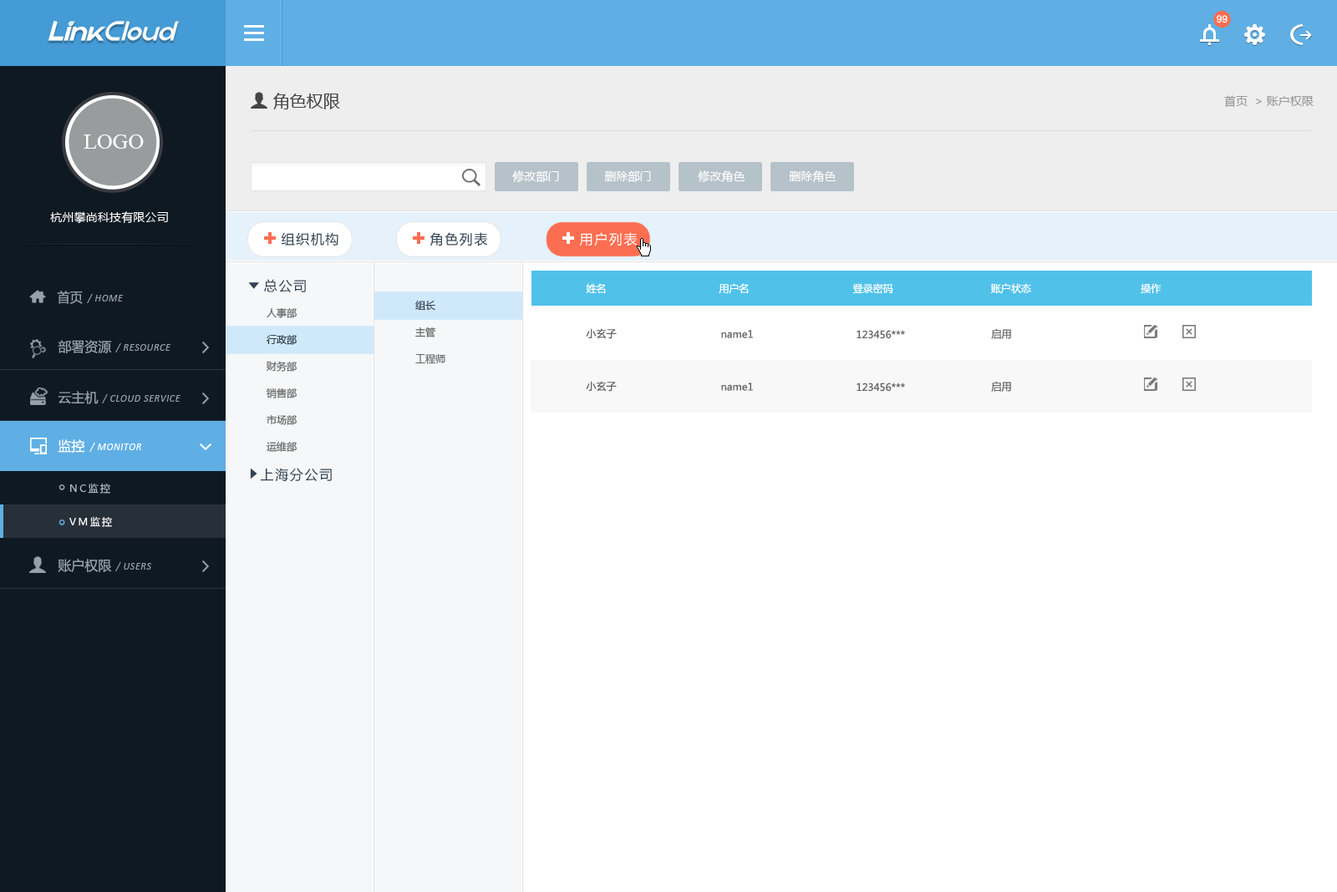
<style>
.page{position:relative;width:1337px;height:892px;background:#ffffff}
.page>*{position:absolute;margin:0}
.t1{font:10px "ArialMT";color:#ffffff}
.t2{font:16.7px "MicrosoftYaHei";color:#444444}
.t3{font:11.7px "MicrosoftYaHei";color:#999999}
.t4{font:21.7px "TimesNewRomanPSMT";color:#ffffff}
.t5{font:11.7px "MicrosoftYaHei";color:#ffffff}
.t6{font:11.7px "MicrosoftYaHei";letter-spacing:0.01em;color:#ffffff}
.t7{font:13.4px "MicrosoftYaHei";letter-spacing:0.1em;color:#334353}
.t8{font:13.4px "MicrosoftYaHei";letter-spacing:0.1em;color:#ffffff}
.t9{font:13.4px "MicrosoftYaHei";color:#95a0aa;scale:0.96 1}
.t10{font:10px "MicrosoftYaHei";color:#ffffff}
.t11{font:10px "Calibri-Italic";letter-spacing:0.05em;color:#95a0aa}
.t12{font:10px/26.7px "MicrosoftYaHei";color:#666666}
.t13{font:10px/26.7px "MicrosoftYaHei";color:#334353}
.t14{font:10px "MicrosoftYaHei";color:#666666}
.t15{font:13.4px "MicrosoftYaHei";color:#95a0aa}
.t16{font:10px "Calibri-Italic";letter-spacing:0.05em;color:#95a0aa;text-transform:uppercase}
.t17{font:13.4px "MicrosoftYaHei";color:#ffffff}
.t18{font:10px "Calibri-Italic";letter-spacing:0.05em;color:#ffffff;text-transform:uppercase}
.t19{font:10px "Calibri-Italic";letter-spacing:0.05em;color:#ffffff}
.t20{font:10px/33.4px "MicrosoftYaHei";letter-spacing:0.2em;color:#b0bdc4}
.t21{font:10px/33.4px "MicrosoftYaHei";letter-spacing:0.2em;color:#ffffff}
</style>
<div class="page">
<p class="t1" style="left:1216px;top:15px;width:11px;height:8px">99</p>
<p class="t2" style="left:273px;top:93px;width:67px;height:16px">角色权限</p>
<p class="t3" style="left:1224px;top:95px;width:89px;height:12px">首页  &gt; 账户权限</p>
<p class="t4" style="left:84px;top:134px;width:60px;height:15px">LOGO</p>
<p class="t5" style="left:512px;top:170px;width:47px;height:13px">修改部门</p>
<p class="t5" style="left:604px;top:170px;width:47px;height:12px">删除部门</p>
<p class="t5" style="left:698px;top:170px;width:47px;height:13px">修改角色</p>
<p class="t5" style="left:789px;top:170px;width:47px;height:12px">删除角色</p>
<p class="t6" style="left:50px;top:211px;width:118px;height:13px">杭州攀尚科技有限公司</p>
<p class="t7" style="left:281px;top:232px;width:57px;height:14px">组织机构</p>
<p class="t7" style="left:429px;top:232px;width:59px;height:14px">角色列表</p>
<p class="t8" style="left:579px;top:232px;width:58px;height:14px">用户列表</p>
<p class="t7" style="left:264px;top:279px;width:42px;height:13px">总公司</p>
<p class="t9" style="left:57px;top:291px;width:26px;height:13px">首页</p>
<p class="t10" style="left:586px;top:283px;width:575px;height:11px">姓名                                      用户名                                   登录密码                                 账户状态                                     操作</p>
<p class="t11" style="left:87px;top:294px;width:37px;height:9px">/ HOME</p>
<p class="t12" style="left:415px;top:300px;width:30px;height:64px"><span class="t13">组长<br></span>主管<br>工程师</p>
<p class="t12" style="left:266px;top:307px;width:31px;height:145px;text-align:right">人事部<br><span class="t13">行政部<br></span>财务部<br>销售部<br>市场部<br>运维部</p>
<p class="t14" style="left:586px;top:328px;width:30px;height:11px">小玄子</p>
<p class="t14" style="left:721px;top:330px;width:32px;height:8px">name1</p>
<p class="t14" style="left:856px;top:330px;width:49px;height:9px">123456***</p>
<p class="t14" style="left:991px;top:328px;width:20px;height:11px">启用</p>
<p class="t15" style="left:58px;top:340px;width:54px;height:13px">部署资源</p>
<p class="t16" style="left:115px;top:343px;width:56px;height:10px"><span class="t11">/ </span>resource</p>
<p class="t14" style="left:586px;top:381px;width:30px;height:11px">小玄子</p>
<p class="t14" style="left:721px;top:383px;width:32px;height:8px">name1</p>
<p class="t14" style="left:856px;top:383px;width:49px;height:9px">123456***</p>
<p class="t14" style="left:991px;top:381px;width:20px;height:11px">启用</p>
<p class="t15" style="left:58px;top:391px;width:41px;height:13px">云主机</p>
<p class="t16" style="left:102px;top:394px;width:78px;height:9px"><span class="t11">/ </span>cloud service</p>
<p class="t17" style="left:58px;top:439px;width:27px;height:14px">监控</p>
<p class="t18" style="left:89px;top:443px;width:53px;height:9px"><span class="t19">/ </span>monitor</p>
<p class="t7" style="left:261px;top:468px;width:71px;height:14px">上海分公司</p>
<p class="t20" style="left:69px;top:483px;width:43px;height:44px">NC监控<br><span class="t21">VM监控<br></span>基础资源</p>
<p class="t15" style="left:58px;top:559px;width:54px;height:13px">账户权限</p>
<p class="t16" style="left:115px;top:562px;width:36px;height:9px"><span class="t11">/ </span>users</p>
</div>
